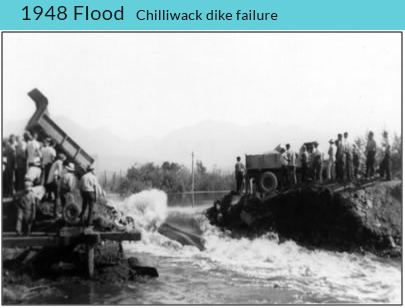
<style>
.page{position:relative;width:405px;height:308px}
.page>*{position:absolute;margin:0}
.t1{font:20px "Lato-Regular";letter-spacing:0.025em;color:#1a1a1a}
.t2{font:14px "Lato-Regular";letter-spacing:0.025em;color:#1a1a1a}
</style>
<div class="page">
<p class="t1" style="left:22px;top:6px;width:102px;height:14px">1948 Flood</p>
<p class="t2" style="left:136px;top:10px;width:142px;height:10px">Chilliwack dike failure</p>
</div>
